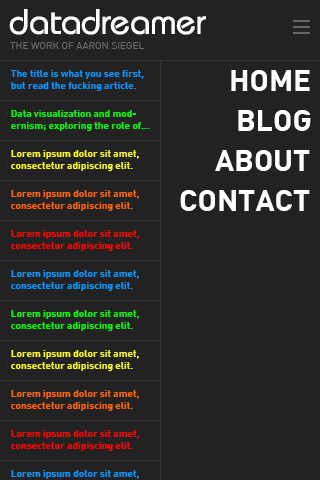
<style>
.page{position:relative;width:320px;height:480px;background:#222222}
.page>*{position:absolute;margin:0}
.t1{font:36px "Bauhaus";letter-spacing:-0.005em;color:#ffffff}
.t2{font:10px "DIN-Regular";color:#666666}
.t3{font:10px "DIN-Bold";color:#0099ff}
.t4{font:30px "DIN-Bold";color:#ffffff}
.t5{font:10px "DIN-Bold";color:#00ff00}
.t6{font:10px "DIN-Bold";color:#ffff00}
.t7{font:10px "DIN-Bold";color:#ff6600}
.t8{font:10px "DIN-Bold";color:#ff0000}
</style>
<div class="page">
<p class="t1" style="left:9px;top:9px;width:197px;height:26px">datadreamer</p>
<p class="t2" style="left:10px;top:42px;width:135px;height:7px">THE WORK OF AARON SIEGEL</p>
<p class="t3" style="left:10px;top:70px;width:134px;height:21px">The title is what you see first, but read the fucking article.</p>
<p class="t4" style="left:231px;top:70px;width:79px;height:21px">HOME</p>
<p class="t5" style="left:11px;top:110px;width:139px;height:21px">Data visualization and modernism; exploring the role of...</p>
<p class="t4" style="left:238px;top:110px;width:73px;height:21px">BLOG</p>
<p class="t6" style="left:11px;top:150px;width:128px;height:21px">Lorem ipsum dolor sit amet, consectetur adipiscing elit.</p>
<p class="t4" style="left:215px;top:150px;width:95px;height:21px">ABOUT</p>
<p class="t7" style="left:11px;top:190px;width:128px;height:21px">Lorem ipsum dolor sit amet, consectetur adipiscing elit.</p>
<p class="t4" style="left:180px;top:190px;width:130px;height:21px">CONTACT</p>
<p class="t8" style="left:11px;top:230px;width:128px;height:21px">Lorem ipsum dolor sit amet, consectetur adipiscing elit.</p>
<p class="t3" style="left:11px;top:270px;width:128px;height:21px">Lorem ipsum dolor sit amet, consectetur adipiscing elit.</p>
<p class="t5" style="left:11px;top:310px;width:128px;height:21px">Lorem ipsum dolor sit amet, consectetur adipiscing elit.</p>
<p class="t6" style="left:11px;top:350px;width:128px;height:21px">Lorem ipsum dolor sit amet, consectetur adipiscing elit.</p>
<p class="t7" style="left:11px;top:390px;width:128px;height:21px">Lorem ipsum dolor sit amet, consectetur adipiscing elit.</p>
<p class="t8" style="left:11px;top:430px;width:128px;height:21px">Lorem ipsum dolor sit amet, consectetur adipiscing elit.</p>
</div>
